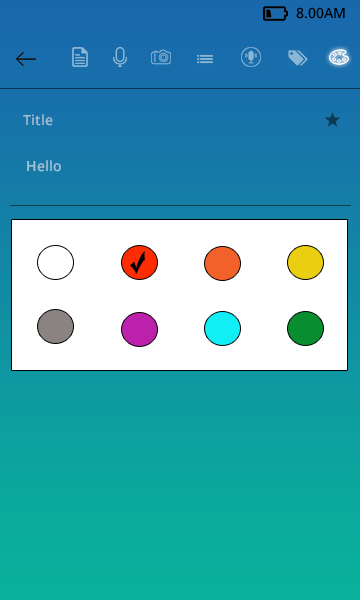
<style>
.page{position:relative;width:360px;height:600px}
.page>*{position:absolute;margin:0}
.t1{font:14px "OpenSans-Semibold";color:#000000}
.t2{font:14px "OpenSans-Semibold";color:#a5bdd3}
.t3{font:14px "OpenSans-Semibold";color:#a7c3d6}
</style>
<div class="page">
<p class="t1" style="left:296px;top:7px;width:49px;height:12px">8.00AM</p>
<p class="t2" style="left:23px;top:114px;width:30px;height:12px">Title</p>
<p class="t3" style="left:27px;top:160px;width:34px;height:12px">Hello</p>
</div>
